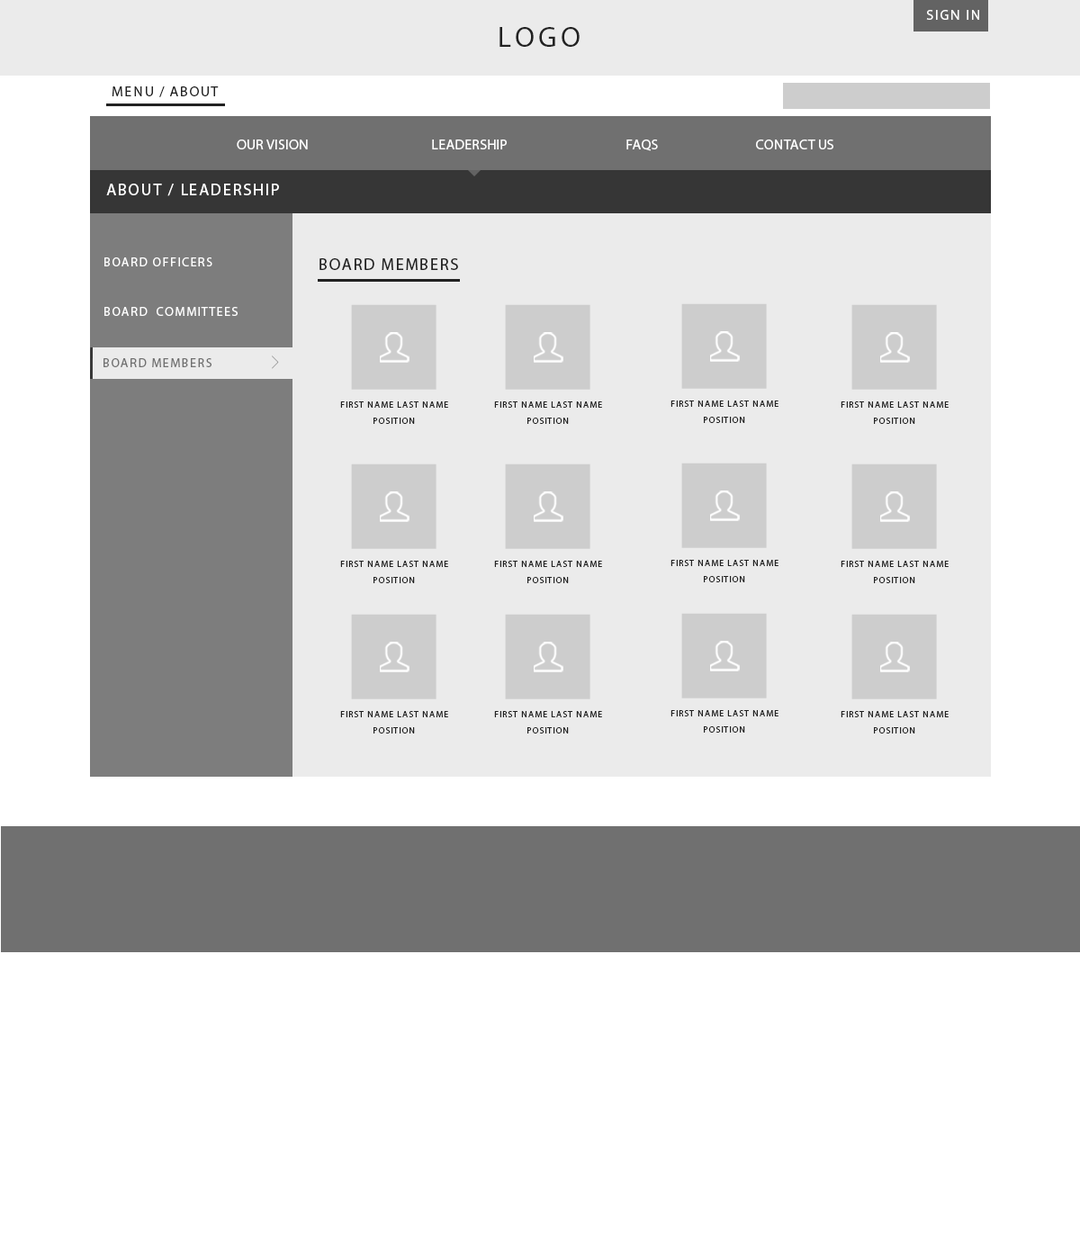
<style>
.page{position:relative;width:1080px;height:1233px;background:#ffffff}
.page>*{position:absolute;margin:0}
.t1{font:14.4px "MyriadPro-Regular";letter-spacing:0.1em;color:#ffffff;text-transform:uppercase}
.t2{font:28.8px "MyriadPro-Regular";letter-spacing:0.12em;color:#222222;text-transform:uppercase}
.t3{font:14.4px "MyriadPro-Regular";letter-spacing:0.1em;color:#222222;text-transform:uppercase}
.t4{font:14.3px "MyriadPro-Regular";color:#ffffff;text-transform:uppercase}
.t5{font:16.2px "MyriadPro-Regular";letter-spacing:0.1em;color:#ffffff}
.t6{font:12.6px "MyriadPro-Regular";letter-spacing:0.1em;color:#ffffff;text-transform:uppercase}
.t7{font:16.2px "MyriadPro-Regular";letter-spacing:0.1em;color:#222222;text-transform:uppercase}
.t8{font:12.6px "MyriadPro-Regular";letter-spacing:0.1em;color:#707070;text-transform:uppercase}
.t9{font:9px/16.2px "MyriadPro-Regular";letter-spacing:0.1em;color:#222222}
</style>
<div class="page">
<p class="t1" style="left:926px;top:10px;width:53px;height:10px">Sign in</p>
<p class="t2" style="left:500px;top:27px;width:80px;height:20px">LOGO</p>
<p class="t3" style="left:112px;top:86px;width:107px;height:11px">MENU / About</p>
<p class="t4" style="left:237px;top:140px;width:596px;height:11px">Our Vision    Leadership    FAQS   Contact Us</p>
<p class="t5" style="left:106px;top:184px;width:173px;height:12px">ABOUT / LEADERSHIP</p>
<p class="t6" style="left:104px;top:257px;width:108px;height:9px">BOARD Officers</p>
<p class="t7" style="left:320px;top:258px;width:138px;height:12px">BOARD MEMBERS</p>
<p class="t6" style="left:104px;top:307px;width:134px;height:9px">BOARD  CommitTeeS</p>
<p class="t8" style="left:104px;top:358px;width:108px;height:9px">BOARD MEMBERS</p>
<p class="t9" style="left:340px;top:401px;width:108px;height:23px;text-align:center">FIRST NAME LAST NAME<br>POSITION</p>
<p class="t9" style="left:494px;top:401px;width:108px;height:23px;text-align:center">FIRST NAME LAST NAME<br>POSITION</p>
<p class="t9" style="left:670px;top:400px;width:108px;height:23px;text-align:center">FIRST NAME LAST NAME<br>POSITION</p>
<p class="t9" style="left:841px;top:401px;width:108px;height:23px;text-align:center">FIRST NAME LAST NAME<br>POSITION</p>
<p class="t9" style="left:340px;top:561px;width:108px;height:22px;text-align:center">FIRST NAME LAST NAME<br>POSITION</p>
<p class="t9" style="left:494px;top:561px;width:108px;height:22px;text-align:center">FIRST NAME LAST NAME<br>POSITION</p>
<p class="t9" style="left:670px;top:560px;width:108px;height:22px;text-align:center">FIRST NAME LAST NAME<br>POSITION</p>
<p class="t9" style="left:841px;top:561px;width:108px;height:22px;text-align:center">FIRST NAME LAST NAME<br>POSITION</p>
<p class="t9" style="left:340px;top:711px;width:108px;height:23px;text-align:center">FIRST NAME LAST NAME<br>POSITION</p>
<p class="t9" style="left:494px;top:711px;width:108px;height:23px;text-align:center">FIRST NAME LAST NAME<br>POSITION</p>
<p class="t9" style="left:670px;top:710px;width:108px;height:23px;text-align:center">FIRST NAME LAST NAME<br>POSITION</p>
<p class="t9" style="left:841px;top:711px;width:108px;height:23px;text-align:center">FIRST NAME LAST NAME<br>POSITION</p>
</div>
